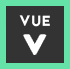
<style>
.page{position:relative;width:70px;height:69px;background:#333333}
.page>*{position:absolute;margin:0}
.t1{font:15px "Jaapokki-Regular";letter-spacing:0.06em;color:#ffffff}
.t2{font:26.9px "Jaapokki-Regular";letter-spacing:0.06em;color:#ffffff;scale:1.19 1}
</style>
<div class="page">
<p class="t1" style="left:19px;top:15px;width:31px;height:12px">VUE</p>
<p class="t2" style="left:24px;top:35px;width:22px;height:19px">V</p>
</div>
